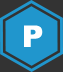
<style>
.page{position:relative;width:63px;height:72px;background:#2096cd}
.page>*{position:absolute;margin:0}
.t1{font:30px "Arial-Black";color:#ffffff}
</style>
<div class="page">
<p class="t1" style="left:24px;top:25px;width:19px;height:22px">P</p>
</div>
